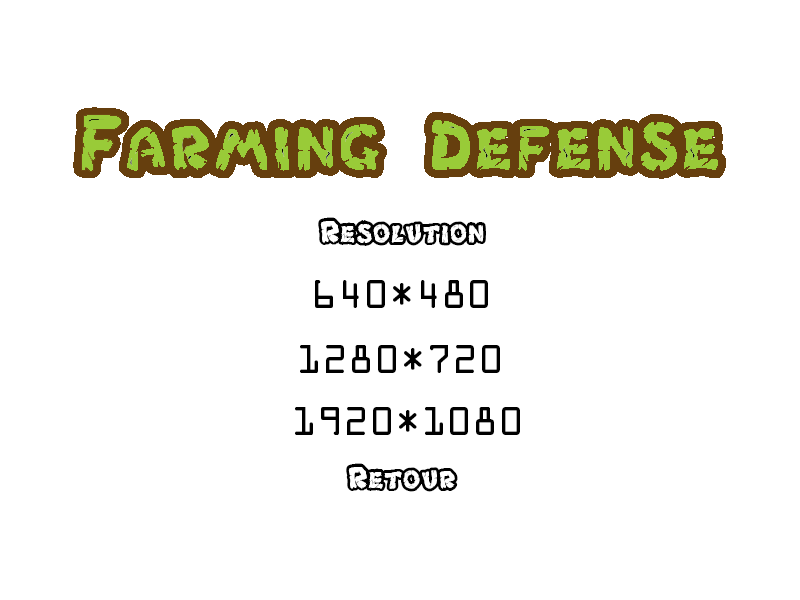
<style>
.page{position:relative;width:800px;height:600px;background:#ffffff}
.page>*{position:absolute;margin:0}
.t1{font:36px "Chlorinar";color:#000000}
.t2{font:36px "OCRAStd";color:#000000}
</style>
<div class="page">
<p class="t1" style="left:318px;top:217px;width:168px;height:29px">Resolution</p>
<p class="t2" style="left:315px;top:280px;width:173px;height:28px">640*480</p>
<p class="t2" style="left:300px;top:345px;width:200px;height:28px">1280*720</p>
<p class="t2" style="left:295px;top:407px;width:225px;height:28px">1920*1080</p>
<p class="t1" style="left:346px;top:463px;width:112px;height:29px">Retour</p>
</div>
